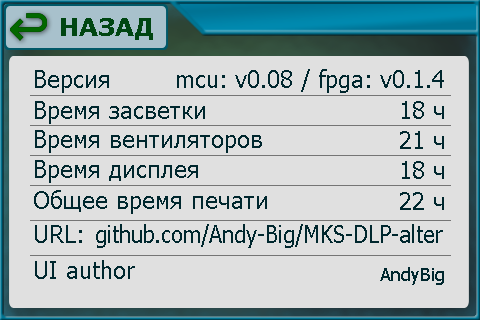
<style>
.page{position:relative;width:480px;height:320px;background:#e0e0e0}
.page>*{position:absolute;margin:0}
.t1{font:24px "Verdana-Bold";color:#004612}
.t2{font:24px "Tahoma";color:#00272e}
.t3{font:24px "Tahoma";color:#00272e;scale:0.93 1}
.t4{font:18px "Tahoma";color:#00272e}
</style>
<div class="page">
<p class="t1" style="left:61px;top:18px;width:92px;height:22px">НАЗАД</p>
<p class="t2" style="left:35px;top:70px;width:74px;height:23px">Версия</p>
<p class="t2" style="left:177px;top:69px;width:267px;height:24px">mcu: v0.08 / fpga: v0.1.4</p>
<p class="t2" style="left:35px;top:101px;width:170px;height:23px">Время засветки</p>
<p class="t2" style="left:402px;top:101px;width:42px;height:18px">18 ч</p>
<p class="t2" style="left:35px;top:130px;width:227px;height:23px">Время вентиляторов</p>
<p class="t2" style="left:400px;top:131px;width:44px;height:18px">21 ч</p>
<p class="t2" style="left:35px;top:160px;width:163px;height:23px">Время дисплея</p>
<p class="t2" style="left:402px;top:161px;width:42px;height:18px">18 ч</p>
<p class="t2" style="left:34px;top:190px;width:233px;height:24px">Общее время печати</p>
<p class="t2" style="left:400px;top:192px;width:44px;height:18px">22 ч</p>
<p class="t2" style="left:35px;top:225px;width:47px;height:18px">URL:</p>
<p class="t3" style="left:96px;top:224px;width:347px;height:24px">github.com/Andy-Big/MKS-DLP-alter</p>
<p class="t2" style="left:35px;top:260px;width:100px;height:19px">UI author</p>
<p class="t4" style="left:380px;top:267px;width:64px;height:18px">AndyBig</p>
</div>
